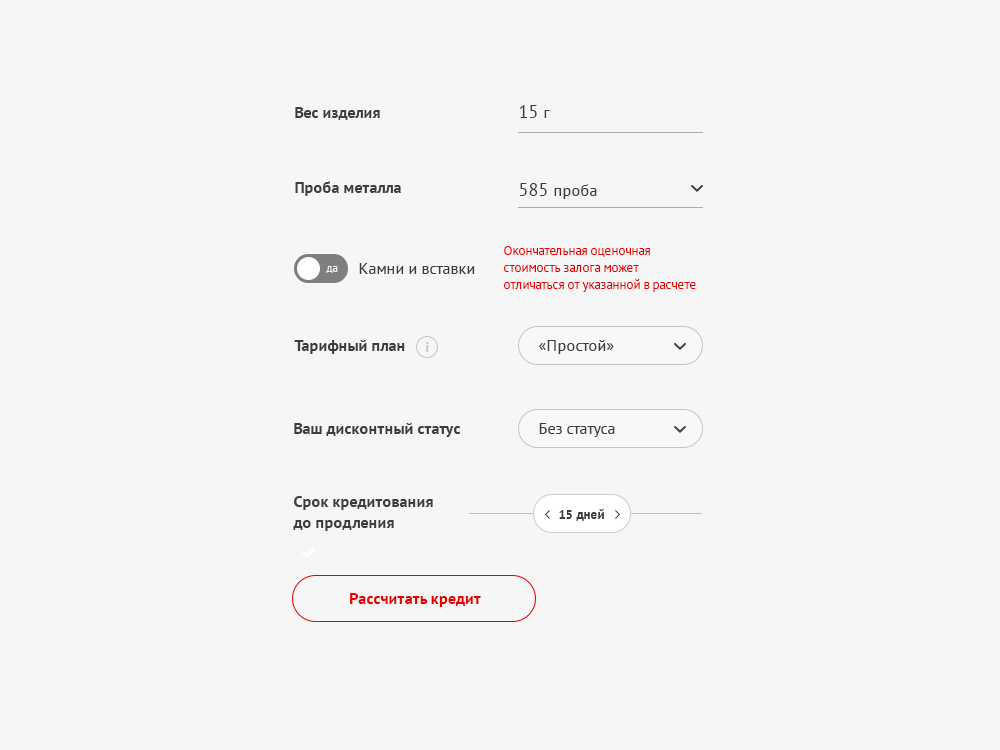
<style>
.page{position:relative;width:1000px;height:750px;background:#f6f6f6}
.page>*{position:absolute;margin:0}
.t1{font:16px "PTSans-Bold";color:#3d3d3d}
.t2{font:18px "PTSans-Regular";color:#3d3d3d}
.t3{font:16px "PTSans-Regular";color:#3d3d3d}
.t4{font:13px/17px "PTSans-Regular";color:#e60000}
.t5{font:11px "PTSans-Regular";color:#fefefe}
.t6{font:16px/21px "PTSans-Bold";color:#3d3d3d}
.t7{font:13px "PTSans-Bold";color:#3d3d3d}
.t8{font:16px "PTSans-Bold";color:#e60000}
</style>
<div class="page">
<p class="t1" style="left:295px;top:107px;width:85px;height:13px">Вес изделия</p>
<p class="t2" style="left:519px;top:105px;width:31px;height:13px">15 <span class="t3">г</span></p>
<p class="t1" style="left:295px;top:181px;width:106px;height:15px">Проба металла</p>
<p class="t3" style="left:519px;top:183px;width:78px;height:16px"><span class="t2">585 </span>проба</p>
<p class="t4" style="left:504px;top:246px;width:192px;height:46px;text-align:right">Окончательная оценочная<br>стоимость залога может<br>отличаться от указанной в расчете</p>
<p class="t5" style="left:326px;top:266px;width:12px;height:7px;opacity:0.9">да</p>
<p class="t3" style="left:359px;top:263px;width:116px;height:11px">Камни и вставки</p>
<p class="t1" style="left:294px;top:340px;width:111px;height:14px">Тарифный план</p>
<p class="t3" style="left:539px;top:340px;width:75px;height:14px">«Простой»</p>
<p class="t1" style="left:294px;top:423px;width:167px;height:14px">Ваш дисконтный статус</p>
<p class="t3" style="left:539px;top:423px;width:76px;height:14px">Без статуса</p>
<p class="t6" style="left:293px;top:496px;width:140px;height:35px;text-align:right">Срок кредитования<br>до продления</p>
<p class="t7" style="left:559px;top:509px;width:45px;height:12px">15 дней</p>
<p class="t8" style="left:350px;top:593px;width:131px;height:14px">Рассчитать кредит</p>
</div>
